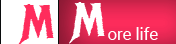
<style>
.page{position:relative;width:176px;height:44px;background:#ffffff}
.page>*{position:absolute;margin:0}
.t1{font:58.3px "MetalMania-Regular";color:#ff2c5c}
.t2{font:58.3px "MetalMania-Regular";color:#ffffff}
.t3{font:16.7px "Roboto-Regular";color:#ffffff}
</style>
<div class="page">
<p class="t1" style="left:18px;top:4px;width:36px;height:42px">m</p>
<p class="t2" style="left:69px;top:2px;width:36px;height:42px">m</p>
<p class="t3" style="left:108px;top:27px;width:50px;height:13px">ore life</p>
</div>
